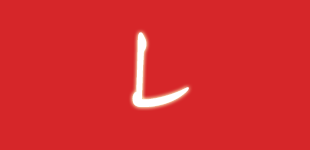
<style>
.page{position:relative;width:310px;height:150px;background:#d62629}
.page>*{position:absolute;margin:0}
.t1{font:106.7px "SketchFlowPrint";color:#ffffff}
</style>
<div class="page">
<p class="t1" style="left:132px;top:32px;width:57px;height:75px">L</p>
</div>
